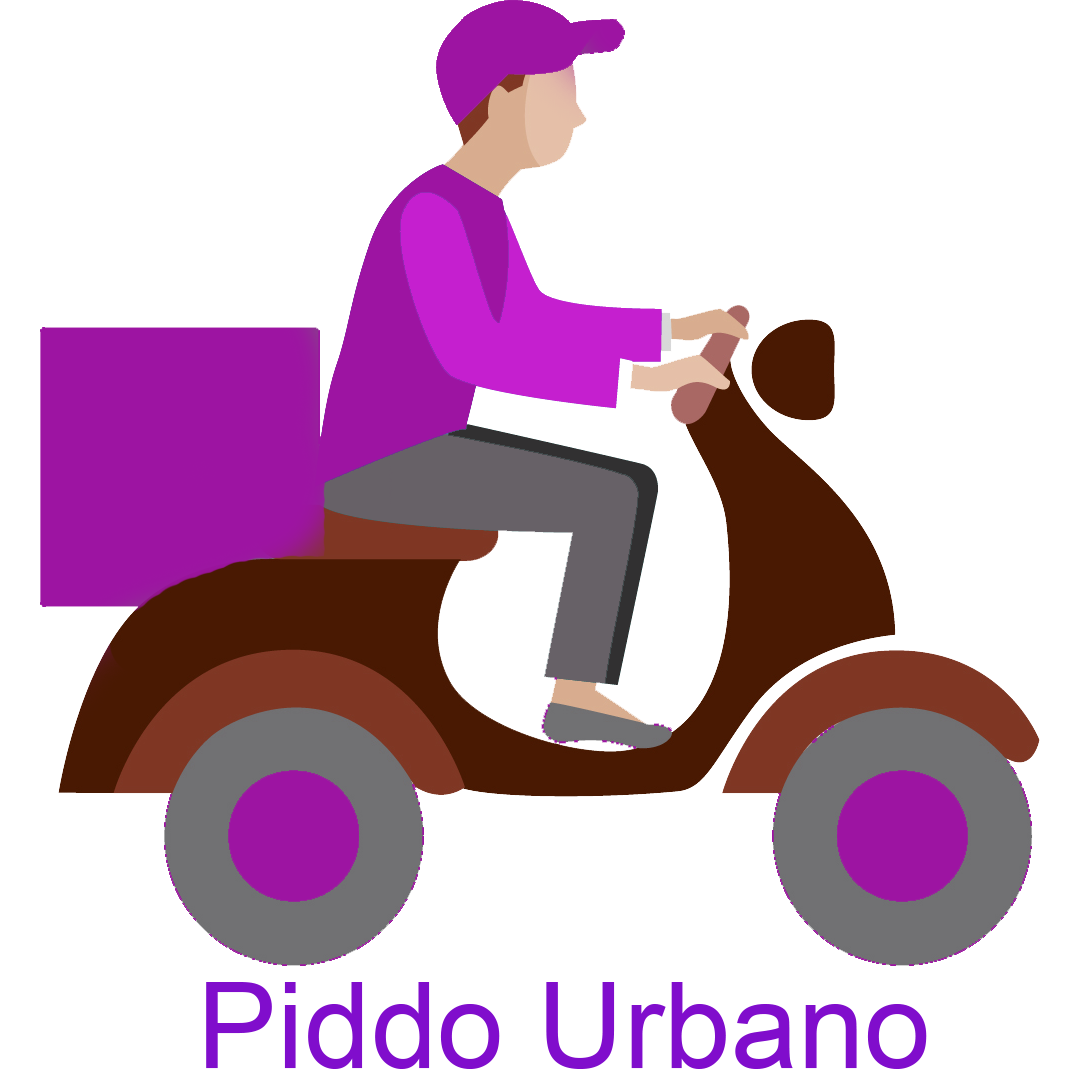
<style>
.page{position:relative;width:1080px;height:1080px;background:#ffffff}
.page>*{position:absolute;margin:0}
.t1{font:120px "ArialMT";color:#800dcc}
</style>
<div class="page">
<p class="t1" style="left:206px;top:982px;width:721px;height:87px">Piddo Urbano</p>
</div>
